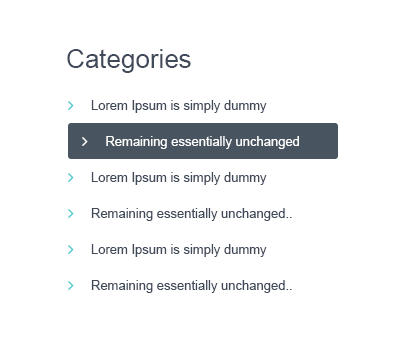
<style>
.page{position:relative;width:408px;height:349px;background:#ffffff}
.page>*{position:absolute;margin:0}
.t1{font:26px "ArialMT";color:#414a5a}
.t2{font:13px/36px "ArialMT";color:#414a5a}
.t3{font:13px/36px "ArialMT";color:#ffffff}
</style>
<div class="page">
<p class="t1" style="left:67px;top:49px;width:124px;height:24px">Categories</p>
<p class="t2" style="left:91px;top:100px;width:208px;height:193px">Lorem Ipsum is simply dummy<br>    <span class="t3">Remaining essentially unchanged<br></span>Lorem Ipsum is simply dummy<br>Remaining essentially unchanged..<br>Lorem Ipsum is simply dummy<br>Remaining essentially unchanged..</p>
</div>
